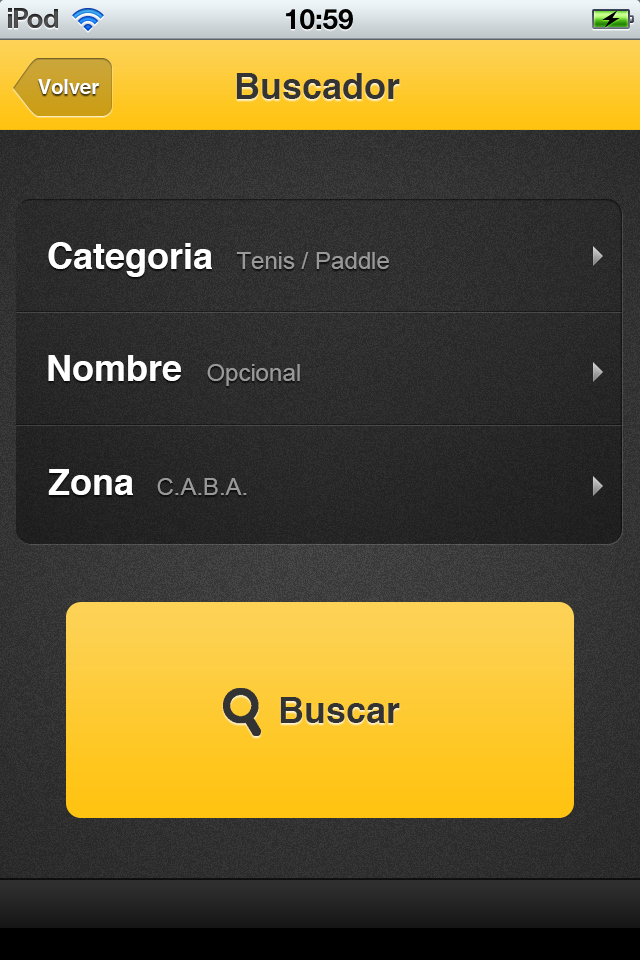
<style>
.page{position:relative;width:640px;height:960px}
.page>*{position:absolute;margin:0}
.t1{font:36px "Helvetica-Bold";color:#343434}
.t2{font:20px "Helvetica-Bold";color:#ffffff}
.t3{font:36px "Helvetica-Bold";color:#ffffff}
.t4{font:24px "ArialMT";color:#999999}
.t5{font:36px "Helvetica-Bold";color:#333333}
</style>
<div class="page">
<p class="t1" style="left:236px;top:73px;width:164px;height:26px">Buscador</p>
<p class="t2" style="left:38px;top:79px;width:61px;height:15px">Volver</p>
<p class="t3" style="left:48px;top:242px;width:164px;height:35px">Categoria</p>
<p class="t4" style="left:236px;top:252px;width:153px;height:17px">Tenis / Paddle</p>
<p class="t3" style="left:48px;top:355px;width:133px;height:26px">Nombre</p>
<p class="t4" style="left:207px;top:364px;width:93px;height:22px">Opcional</p>
<p class="t3" style="left:48px;top:469px;width:85px;height:26px">Zona</p>
<p class="t4" style="left:157px;top:478px;width:90px;height:17px">C.A.B.A.</p>
<p class="t5" style="left:280px;top:697px;width:120px;height:26px">Buscar</p>
</div>
